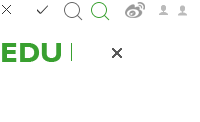
<style>
.page{position:relative;width:200px;height:122px;background:#ffffff}
.page>*{position:absolute;margin:0}
.t1{font:28px "GillSansMT-Bold";color:#39a030}
</style>
<div class="page">
<p class="t1" style="left:2px;top:43px;width:59px;height:19px">EDU</p>
</div>
